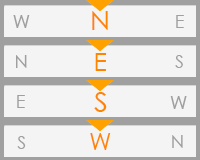
<style>
.page{position:relative;width:200px;height:160px;background:#f4f4f4}
.page>*{position:absolute;margin:0}
.t1{font:18px "CenturyGothic";color:#9f9f9f}
.t2{font:26.5px "CenturyGothic";color:#ff8400}
.t3{font:24.6px "CenturyGothic";color:#ff8400}
.t4{font:27.8px "CenturyGothic";color:#ff8400}
.t5{font:23.3px "CenturyGothic";color:#ff8400}
</style>
<div class="page">
<p class="t1" style="left:13px;top:15px;width:17px;height:13px">W</p>
<p class="t2" style="left:92px;top:11px;width:16px;height:19px">N</p>
<p class="t1" style="left:176px;top:15px;width:8px;height:13px">E</p>
<p class="t3" style="left:95px;top:53px;width:12px;height:18px">E</p>
<p class="t1" style="left:16px;top:55px;width:11px;height:13px">N</p>
<p class="t1" style="left:175px;top:55px;width:8px;height:13px">S</p>
<p class="t1" style="left:17px;top:95px;width:8px;height:13px">E</p>
<p class="t4" style="left:94px;top:92px;width:13px;height:20px">S</p>
<p class="t1" style="left:170px;top:96px;width:17px;height:13px">W</p>
<p class="t1" style="left:17px;top:136px;width:9px;height:13px">S</p>
<p class="t5" style="left:90px;top:133px;width:21px;height:17px">W</p>
<p class="t1" style="left:172px;top:135px;width:11px;height:13px">N</p>
</div>
